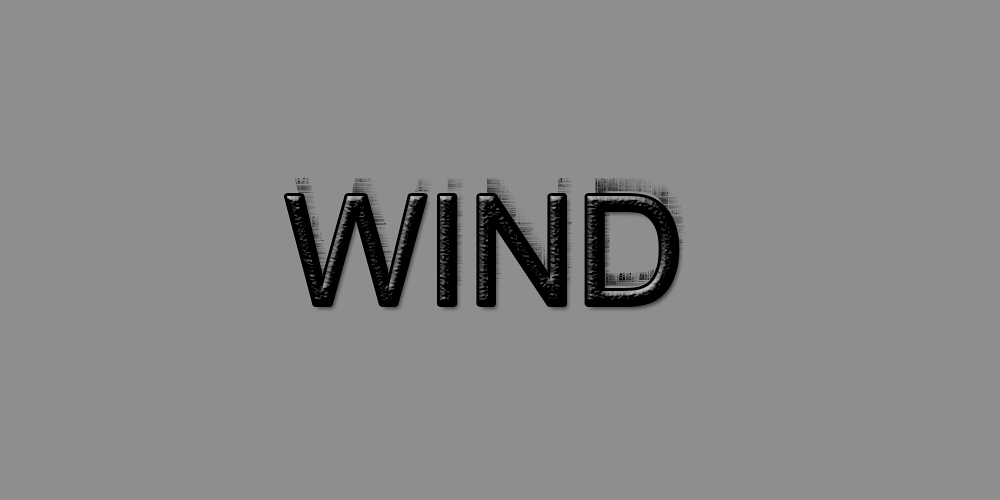
<style>
.page{position:relative;width:1000px;height:500px;background:#8e8e8e}
.page>*{position:absolute;margin:0}
.t1{font:150px "ArialMT";color:#000000}
</style>
<div class="page">
<p class="t1" style="left:286px;top:196px;width:391px;height:108px">WIND</p>
</div>
